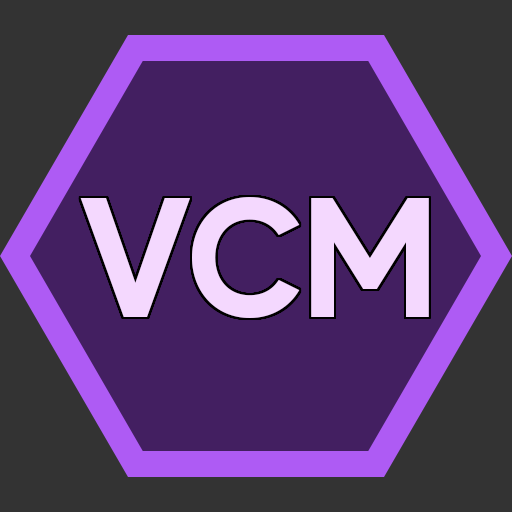
<style>
.page{position:relative;width:512px;height:512px;background:#431f61}
.page>*{position:absolute;margin:0}
.t1{font:170.1px "MADEEvolveSans-Bold";color:#f4d8fe}
</style>
<div class="page">
<p class="t1" style="left:80px;top:197px;width:349px;height:121px">VCM</p>
</div>
